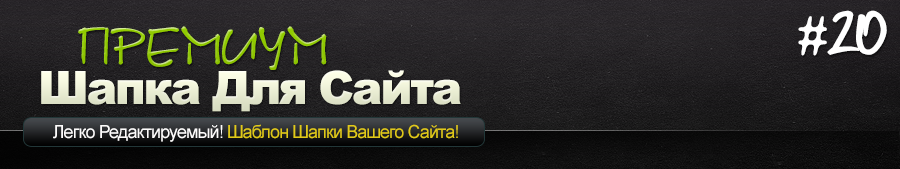
<style>
.page{position:relative;width:900px;height:169px}
.page>*{position:absolute;margin:0}
.t1{font:53px "FAFERS-font";color:#ffffff}
.t2{font:53px "DSNote"}
.t3{font:46px "Arial-Black";letter-spacing:-0.05em;color:#ebeed5}
.t4{font:18px "ArialMT";letter-spacing:-0.05em;color:#e0c918}
.t5{font:18px "ArialMT";letter-spacing:-0.05em;color:#fdfcfc}
</style>
<div class="page">
<p class="t1" style="left:798px;top:10px;width:89px;height:46px">#20</p>
<p class="t2" style="left:78px;top:26px;width:249px;height:44px">Премиум</p>
<p class="t3" style="left:41px;top:70px;width:420px;height:42px">Шапка Для Сайта</p>
<p class="t4" style="left:53px;top:124px;width:405px;height:18px"><span class="t5">Легко Редактируемый! </span>Шаблон Шапки Вашего Сайта!</p>
</div>
